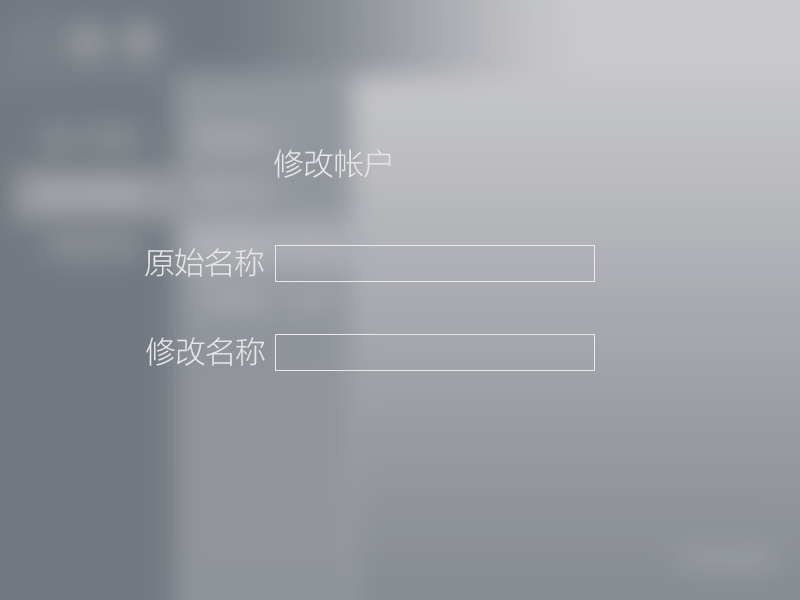
<style>
.page{position:relative;width:800px;height:600px}
.page>*{position:absolute;margin:0}
.t1{font:30px "MicrosoftYaHeiLight";color:#e6e6e6}
</style>
<div class="page">
<p class="t1" style="left:274px;top:149px;width:117px;height:29px">修改帐户</p>
<p class="t1" style="left:145px;top:248px;width:119px;height:29px">原始名称</p>
<p class="t1" style="left:146px;top:337px;width:119px;height:29px">修改名称</p>
</div>
